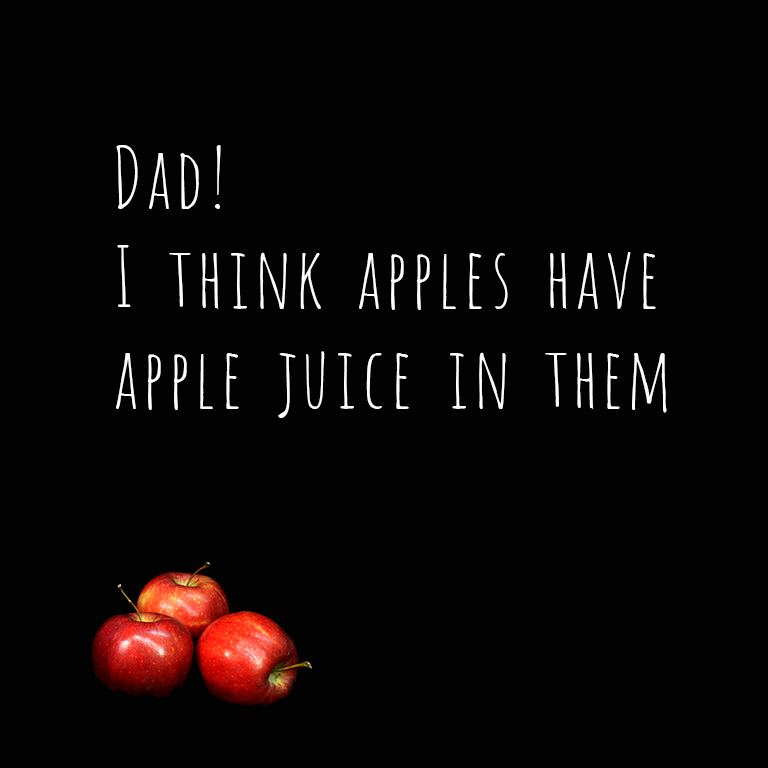
<style>
.page{position:relative;width:768px;height:768px;background:#020202}
.page>*{position:absolute;margin:0}
.t1{font:83.3px "Amatic";color:#fefefe}
</style>
<div class="page">
<p class="t1" style="left:116px;top:145px;width:551px;height:273px">Dad! <br>I think apples have<br>apple juice in them</p>
</div>
